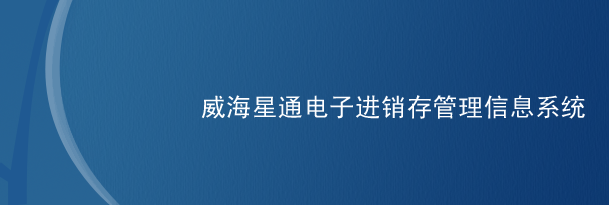
<style>
.page{position:relative;width:609px;height:205px}
.page>*{position:absolute;margin:0}
.t1{font:25.6px "SimHei";letter-spacing:0.005em;color:#ffffff}
</style>
<div class="page">
<p class="t1" style="left:201px;top:95px;width:384px;height:24px">威海星通电子进销存管理信息系统</p>
</div>
